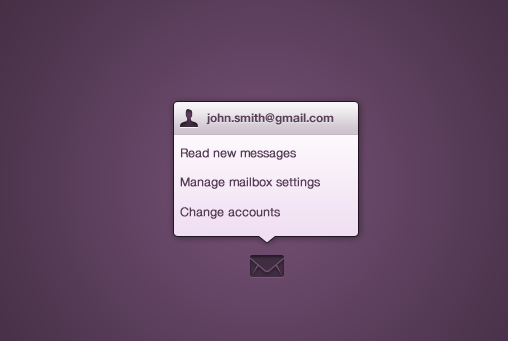
<style>
.page{position:relative;width:508px;height:341px}
.page>*{position:absolute;margin:0}
.t1{font:12px "HelveticaNeue-Bold";color:#5a3f5a}
.t2{font:12px "HelveticaNeue-Light";color:#563b56;font-weight:bold}
</style>
<div class="page">
<p class="t1" style="left:206px;top:113px;width:128px;height:12px">john.smith@gmail.com</p>
<p class="t2" style="left:181px;top:148px;width:115px;height:12px">Read new messages</p>
<p class="t2" style="left:180px;top:177px;width:140px;height:12px">Manage mailbox settings</p>
<p class="t2" style="left:180px;top:207px;width:100px;height:12px">Change accounts</p>
</div>
